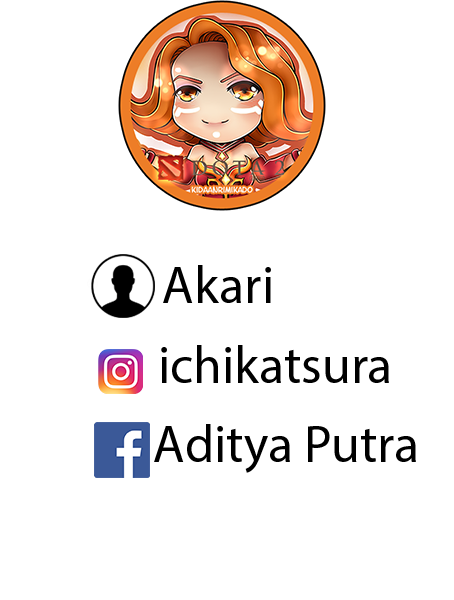
<style>
.page{position:relative;width:454px;height:600px;background:#ffffff}
.page>*{position:absolute;margin:0}
.t1{font:52px "MyriadPro-Regular";color:#000000}
</style>
<div class="page">
<p class="t1" style="left:163px;top:265px;width:108px;height:38px">Akari</p>
<p class="t1" style="left:161px;top:345px;width:228px;height:38px">ichikatsura</p>
<p class="t1" style="left:154px;top:424px;width:262px;height:49px">Aditya Putra</p>
</div>
